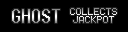
<style>
.page{position:relative;width:128px;height:32px;background:#000000}
.page>*{position:absolute;margin:0}
.t1{font:18px "Terminal"}
.t2{font:10px/8px "Terminal"}
</style>
<div class="page">
<p class="t1" style="left:12px;top:9px;width:48px;height:14px">GHOST</p>
<p class="t2" style="left:70px;top:8px;width:47px;height:15px;text-align:center">COLLECTS<br>JACKPOT</p>
</div>
